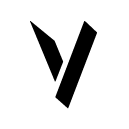
<style>
.page{position:relative;width:129px;height:129px;background:#ffffff}
.page>*{position:absolute;margin:0}
.t1{font:117.1px "UmbraStd";color:#000000;text-transform:uppercase}
</style>
<div class="page">
<p class="t1" style="left:30px;top:21px;width:67px;height:88px">v</p>
</div>
